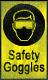
<style>
.page{position:relative;width:48px;height:80px}
.page>*{position:absolute;margin:0}
.t1{font:13px/12px "ArialMT";letter-spacing:0.02em;font-weight:bold;scale:0.79 1}
</style>
<div class="page">
<p class="t1" style="left:3px;top:49px;width:42px;height:26px;text-align:center">Safety<br>Goggles</p>
</div>
